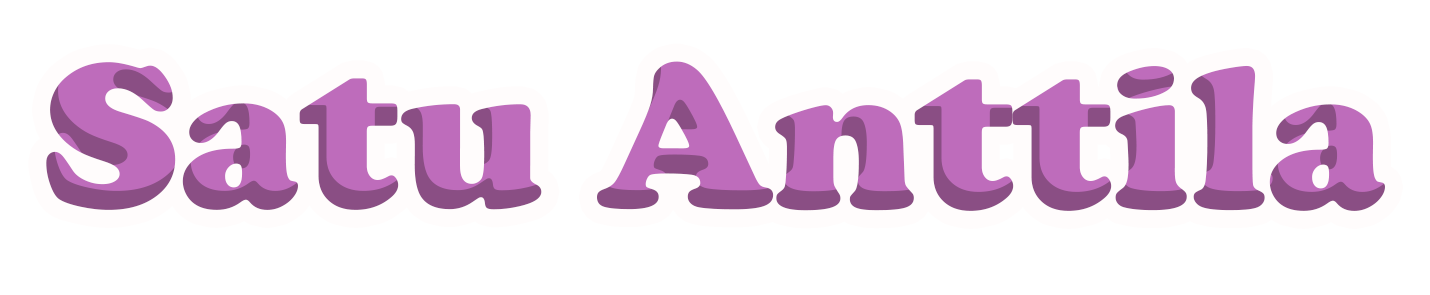
<style>
.page{position:relative;width:1430px;height:295px;background:#ffffff}
.page>*{position:absolute;margin:0}
.t1{font:213px "CooperBlack";color:#be6cbb}
</style>
<div class="page">
<p class="t1" style="left:46px;top:61px;width:1339px;height:150px">Satu Anttila</p>
</div>
